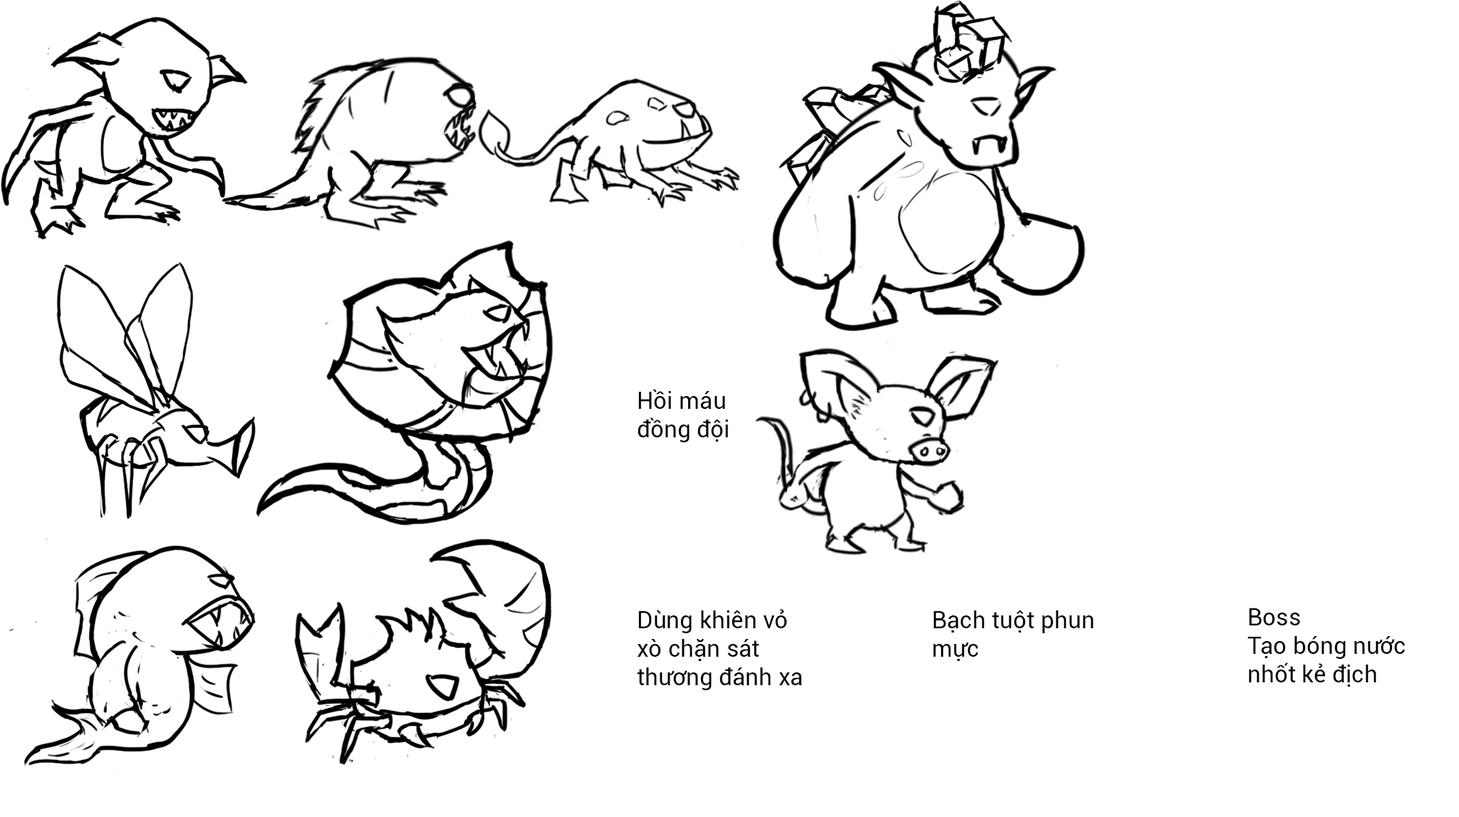
<style>
.page{position:relative;width:1459px;height:817px;background:#ffffff}
.page>*{position:absolute;margin:0}
.t1{font:23.8px "Roboto-Regular";color:#000000}
</style>
<div class="page">
<p class="t1" style="left:638px;top:389px;width:90px;height:53px">Hồi máu đồng đội</p>
<p class="t1" style="left:637px;top:609px;width:165px;height:81px">Dùng khiên vỏ xò chặn sát thương đánh xa</p>
<p class="t1" style="left:933px;top:611px;width:161px;height:50px">Bạch tuột phun mực</p>
<p class="t1" style="left:1248px;top:608px;width:157px;height:79px">Boss<br>Tạo bóng nước nhốt kẻ địch</p>
</div>
